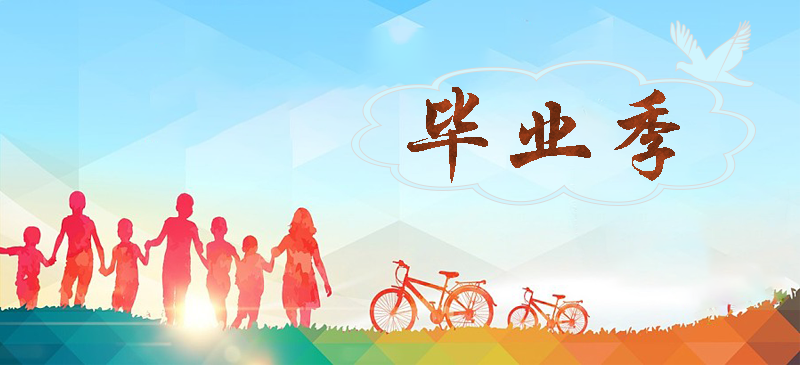
<style>
.page{position:relative;width:800px;height:365px}
.page>*{position:absolute;margin:0}
.t1{font:100px "STXingkai"}
</style>
<div class="page">
<p class="t1" style="left:407px;top:87px;width:273px;height:96px">毕业季</p>
</div>
